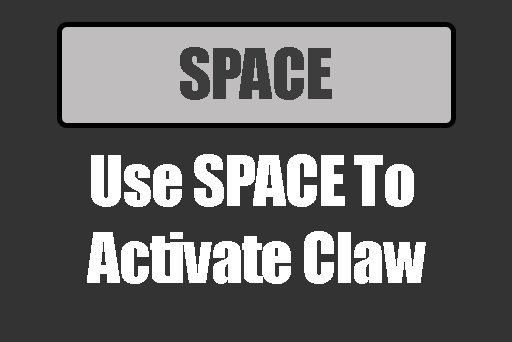
<style>
.page{position:relative;width:512px;height:342px;background:#333333}
.page>*{position:absolute;margin:0}
.t1{font:64px "Impact";letter-spacing:-0.02em;color:#3d3d3d}
.t2{font:64px "Impact";letter-spacing:-0.02em;color:#ffffff}
</style>
<div class="page">
<p class="t1" style="left:180px;top:47px;width:152px;height:53px">SPACE</p>
<p class="t2" style="left:87px;top:154px;width:339px;height:130px;text-align:center">Use SPACE To <br>Activate Claw</p>
</div>
